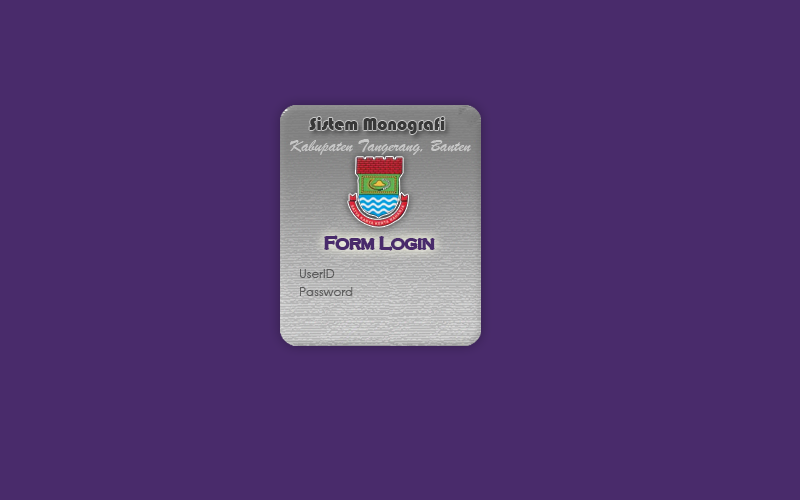
<style>
.page{position:relative;width:800px;height:500px;background:#492b6b}
.page>*{position:absolute;margin:0}
.t1{font:18px "Bauhaus93";color:#393939}
.t2{font:18px "BrushScriptMT";color:#c7c7c7}
.t3{font:18px "CopperplateGothic-Light";color:#492b6b}
.t4{font:12px "CenturyGothic";color:#5b5b5b}
.t5{font:12px "CenturyGothic";color:#5e5e5f}
</style>
<div class="page">
<p class="t1" style="left:309px;top:117px;width:136px;height:17px">Sistem Monografi</p>
<p class="t2" style="left:289px;top:139px;width:182px;height:16px">Kabupaten Tangerang, Banten</p>
<p class="t3" style="left:325px;top:236px;width:109px;height:14px">Form Login</p>
<p class="t4" style="left:300px;top:269px;width:35px;height:9px">UserID</p>
<p class="t5" style="left:300px;top:287px;width:53px;height:9px">Password</p>
</div>
